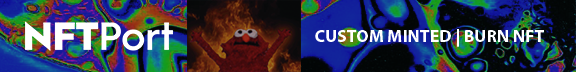
<style>
.page{position:relative;width:576px;height:72px}
.page>*{position:absolute;margin:0}
.t1{font:17.8px "MyriadPro-Bold";color:#ffffff}
</style>
<div class="page">
<p class="t1" style="left:315px;top:29px;width:229px;height:18px">CUSTOM MINTED | BURN NFT</p>
</div>
